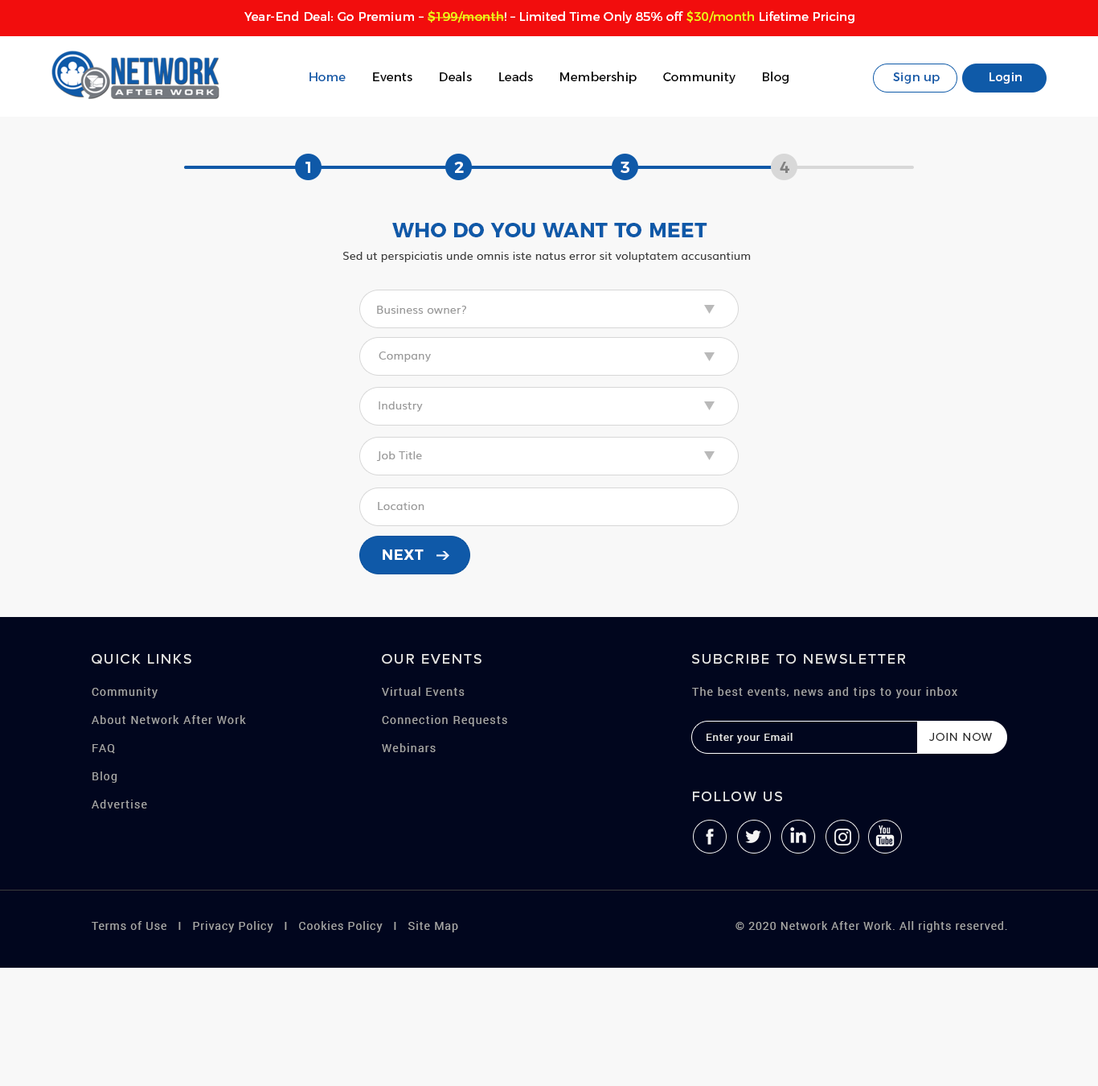
<style>
.page{position:relative;width:1098px;height:1086px;background:#f8f8f8}
.page>*{position:absolute;margin:0}
.t1{font:12.1px "Montserrat-Regular";letter-spacing:0.01em;color:#fffefe}
.t2{font:12.1px "Montserrat-Regular";letter-spacing:0.01em;color:#eafd18}
.t3{font:12.1px "Montserrat-Regular";letter-spacing:0.01em;color:#000000}
.t4{font:12.1px "Montserrat-Regular";letter-spacing:0.01em;color:#0f5aa8}
.t5{font:12.1px "Montserrat-Regular";letter-spacing:0.01em;color:#ffffff}
.t6{font:16.1px "Montserrat-SemiBold";letter-spacing:-0.01em;color:#ffffff}
.t7{font:16.1px "Montserrat-SemiBold";letter-spacing:-0.01em;color:#818181}
.t8{font:20.1px "Montserrat-Bold";letter-spacing:0.01em;color:#0f59a8;text-transform:uppercase}
.t9{font:11.3px "Muli";letter-spacing:0.005em;color:#3c3c3c}
.t10{font:11.3px "Muli";letter-spacing:0.01em;color:#999999}
.t11{font:14.5px "Montserrat-SemiBold";letter-spacing:0.03em;color:#ffffff}
.t12{font:14.5px "ProximaNova-Regular";letter-spacing:0.105em;color:#e7e7e7;text-transform:uppercase}
.t13{font:11.3px/28.1px "Roboto-Regular";letter-spacing:0.085em;color:#a7a7a7}
.t14{font:11.3px "Roboto-Regular";letter-spacing:0.085em;color:#a7a7a7}
.t15{font:10.5px "Roboto-Regular";letter-spacing:0.065em;color:#e7e7e7}
.t16{font:12.1px "ProximaNova-Regular";letter-spacing:0.065em;color:#262626;text-transform:uppercase}
.t17{font:11.3px "Roboto-Regular";letter-spacing:0.065em;color:#a7a7a7}
</style>
<div class="page">
<p class="t1" style="left:244px;top:10px;width:611px;height:13px">Year-End Deal: Go Premium – <span class="t2">$199/month</span>! – Limited Time Only 85% off <span class="t2">$30/month</span> Lifetime Pricing</p>
<p class="t3" style="left:310px;top:72px;width:479px;height:12px"><span class="t4">Home</span>       Events       Deals       Leads       Membership       Community       Blog</p>
<p class="t4" style="left:893px;top:72px;width:47px;height:12px">Sign up</p>
<p class="t5" style="left:990px;top:72px;width:32px;height:12px">Login</p>
<p class="t6" style="left:306px;top:162px;width:4px;height:11px">1</p>
<p class="t6" style="left:454px;top:162px;width:10px;height:11px">2</p>
<p class="t6" style="left:621px;top:162px;width:9px;height:11px">3</p>
<p class="t7" style="left:780px;top:162px;width:10px;height:11px">4</p>
<p class="t8" style="left:392px;top:223px;width:316px;height:14px">who do you want to meet</p>
<p class="t9" style="left:343px;top:252px;width:408px;height:10px">Sed ut perspiciatis unde omnis iste natus error sit voluptatem accusantium</p>
<p class="t10" style="left:377px;top:306px;width:89px;height:8px">Business owner?</p>
<p class="t10" style="left:379px;top:351px;width:52px;height:11px">Company</p>
<p class="t10" style="left:379px;top:401px;width:44px;height:11px">Industry</p>
<p class="t10" style="left:376px;top:451px;width:46px;height:10px">Job Title</p>
<p class="t10" style="left:378px;top:502px;width:47px;height:8px">Location</p>
<p class="t11" style="left:383px;top:549px;width:41px;height:11px">NEXT</p>
<p class="t12" style="left:92px;top:654px;width:99px;height:10px">Quick Links</p>
<p class="t12" style="left:382px;top:654px;width:100px;height:9px">Our Events</p>
<p class="t12" style="left:692px;top:654px;width:213px;height:9px">SUBCRIBE TO NEWSLETTER</p>
<p class="t13" style="left:92px;top:687px;width:154px;height:121px">Community<br>About Network After Work<br>FAQ<br>Blog<br>Advertise</p>
<p class="t13" style="left:382px;top:687px;width:125px;height:65px">Virtual Events<br>Connection Requests<br>Webinars</p>
<p class="t14" style="left:692px;top:687px;width:266px;height:11px">The best events, news and tips to your inbox</p>
<p class="t15" style="left:707px;top:733px;width:86px;height:10px">Enter your Email</p>
<p class="t16" style="left:930px;top:733px;width:62px;height:8px">JOIN NOW</p>
<p class="t12" style="left:693px;top:791px;width:89px;height:10px">FOLLOW US</p>
<p class="t17" style="left:92px;top:921px;width:366px;height:11px">Terms of Use   I   Privacy Policy   I   Cookies Policy   I   Site Map</p>
<p class="t17" style="left:736px;top:921px;width:272px;height:11px">© 2020 Network After Work. All rights reserved.</p>
</div>
